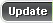
<style>
.page{position:relative;width:53px;height:23px}
.page>*{position:absolute;margin:0}
.t1{font:10.7px "Arial-BoldMT";letter-spacing:0.025em;color:#fdfdfd}
</style>
<div class="page">
<p class="t1" style="left:9px;top:7px;width:38px;height:10px">Update</p>
</div>
